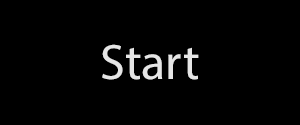
<style>
.page{position:relative;width:300px;height:125px;background:#000000}
.page>*{position:absolute;margin:0}
.t1{font:50px "MyriadPro-Regular";color:#e6e6e6}
</style>
<div class="page">
<p class="t1" style="left:102px;top:44px;width:97px;height:36px">Start</p>
</div>
